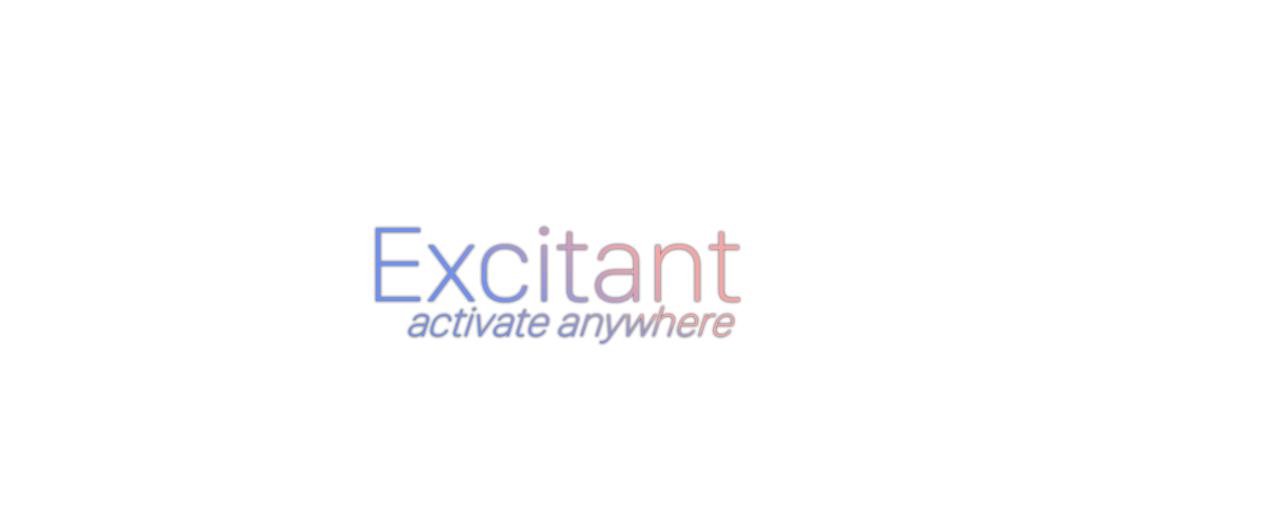
<style>
.page{position:relative;width:1280px;height:530px;background:#ffffff}
.page>*{position:absolute;margin:0}
.t1{font:109.6px "SFCompactDisplay-Ultralight";letter-spacing:-0.01em;scale:1.06 1}
.t2{font:44px "SFCompactDisplay-Ultralight";letter-spacing:-0.01em}
</style>
<div class="page">
<p class="t1" style="left:376px;top:227px;width:364px;height:75px">Excitant</p>
<p class="t2" style="left:408px;top:306px;width:326px;height:38px">activate anywhere</p>
</div>
